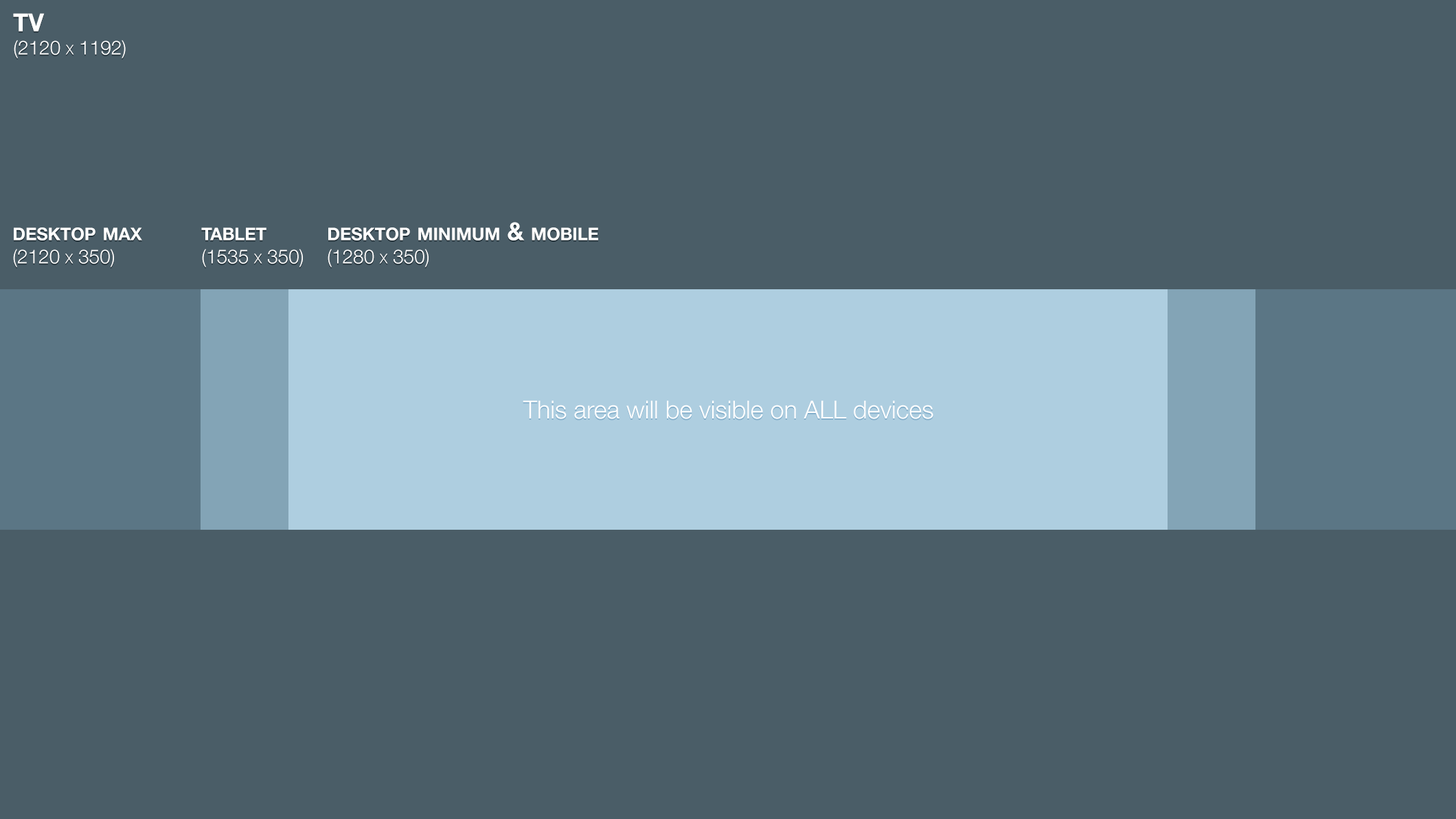
<style>
.page{position:relative;width:1456px;height:819px;background:#4a5d67}
.page>*{position:absolute;margin:0}
.t1{font:19.2px "HelveticaNeue-Light";color:#ffffff;font-variant:small-caps}
.t2{font:24.7px "HelveticaNeue-Bold";color:#ffffff;font-variant:small-caps}
.t3{font:24.7px "HelveticaNeue-Light";color:#ffffff}
</style>
<div class="page">
<p class="t1" style="left:13px;top:13px;width:113px;height:45px"><span class="t2">TV <br></span>(2120 x 1192)</p>
<p class="t2" style="left:328px;top:222px;width:270px;height:45px">desktop minimum &amp; mobile<br><span class="t1">(1280 x 350)</span></p>
<p class="t1" style="left:13px;top:227px;width:129px;height:40px"><span class="t2">desktop max<br></span>(2120 x 350)</p>
<p class="t1" style="left:201px;top:227px;width:102px;height:40px"><span class="t2">tablet<br></span>(1535 x 350)</p>
<p class="t3" style="left:523px;top:400px;width:411px;height:19px">This area will be visible on ALL devices</p>
</div>
